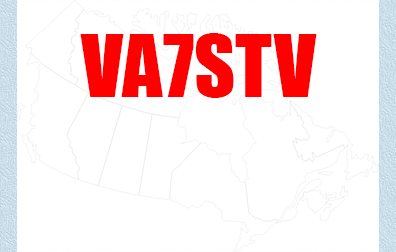
<style>
.page{position:relative;width:396px;height:252px;background:#ffffff}
.page>*{position:absolute;margin:0}
.t1{font:80px "Impact";color:#ff0000}
</style>
<div class="page">
<p class="t1" style="left:80px;top:33px;width:237px;height:65px">VA7STV</p>
</div>
